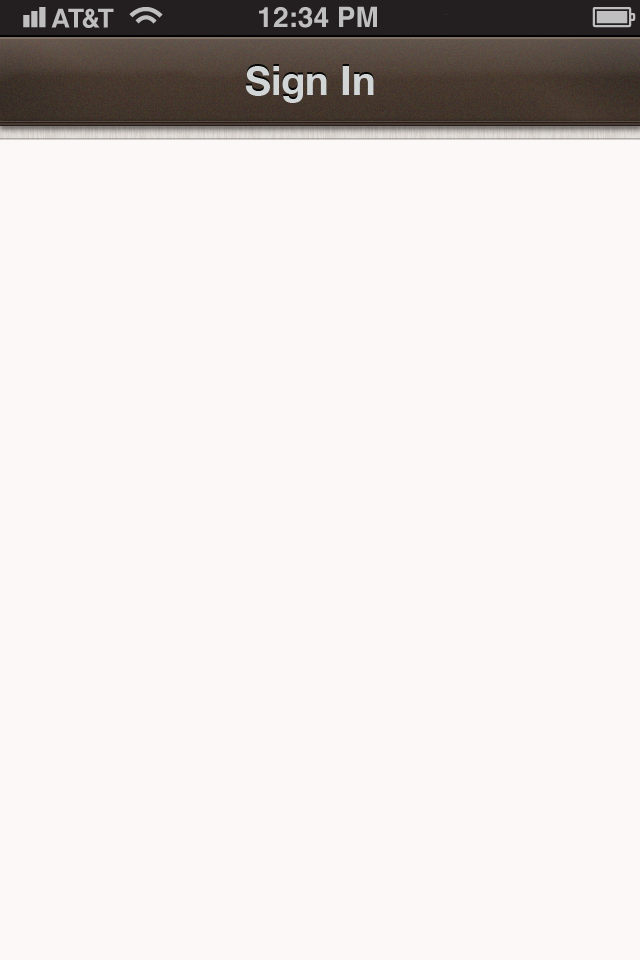
<style>
.page{position:relative;width:640px;height:960px;background:#fbf8f7}
.page>*{position:absolute;margin:0}
.t1{font:40px "HelveticaNeue-Bold";color:#d2d5d6}
</style>
<div class="page">
<p class="t1" style="left:245px;top:66px;width:129px;height:37px">Sign In</p>
</div>
